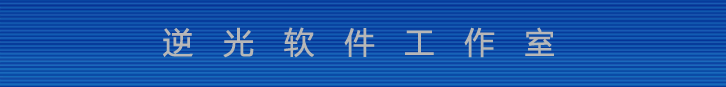
<style>
.page{position:relative;width:726px;height:87px}
.page>*{position:absolute;margin:0}
.t1{font:30px "MicrosoftYaHei";letter-spacing:1em;color:#b7b7b7;font-weight:bold}
</style>
<div class="page">
<p class="t1" style="left:163px;top:27px;width:391px;height:31px">逆光软件工作室</p>
</div>
